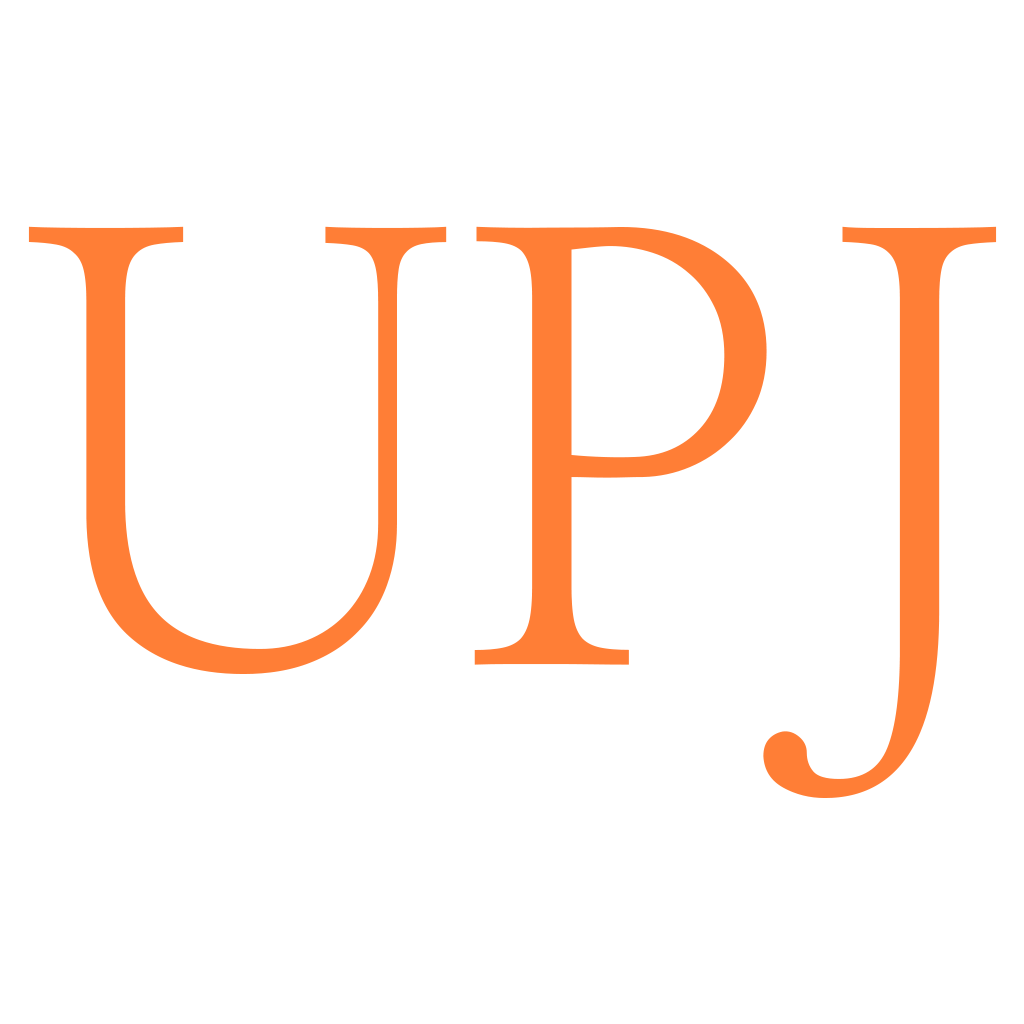
<style>
.page{position:relative;width:1024px;height:1024px;background:#ffffff}
.page>*{position:absolute;margin:0}
.t1{font:600px "NanumMyeongjo";color:#ff7e36}
</style>
<div class="page">
<p class="t1" style="left:28px;top:226px;width:969px;height:572px">UPJ</p>
</div>
